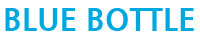
<style>
.page{position:relative;width:200px;height:40px;background:#ffffff}
.page>*{position:absolute;margin:0}
.t1{font:31px "NanumGothicExtraBold";color:#00a8e0}
</style>
<div class="page">
<p class="t1" style="left:5px;top:8px;width:189px;height:23px">BLUE BOTTLE</p>
</div>
